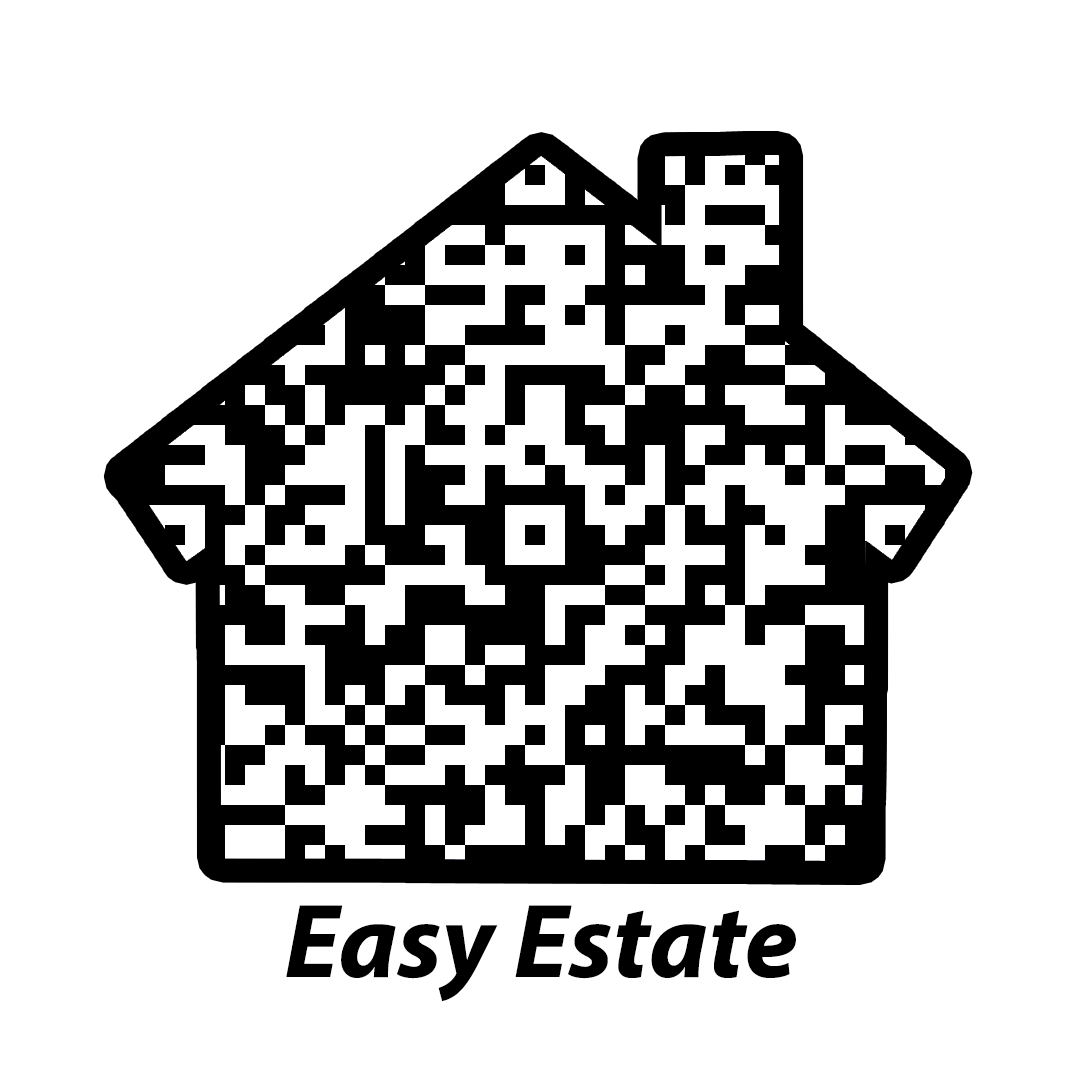
<style>
.page{position:relative;width:1070px;height:1070px;background:#ffffff}
.page>*{position:absolute;margin:0}
.t1{font:106px "MyriadPro-BoldIt";color:#000000}
</style>
<div class="page">
<p class="t1" style="left:286px;top:905px;width:510px;height:96px">Easy Estate</p>
</div>
